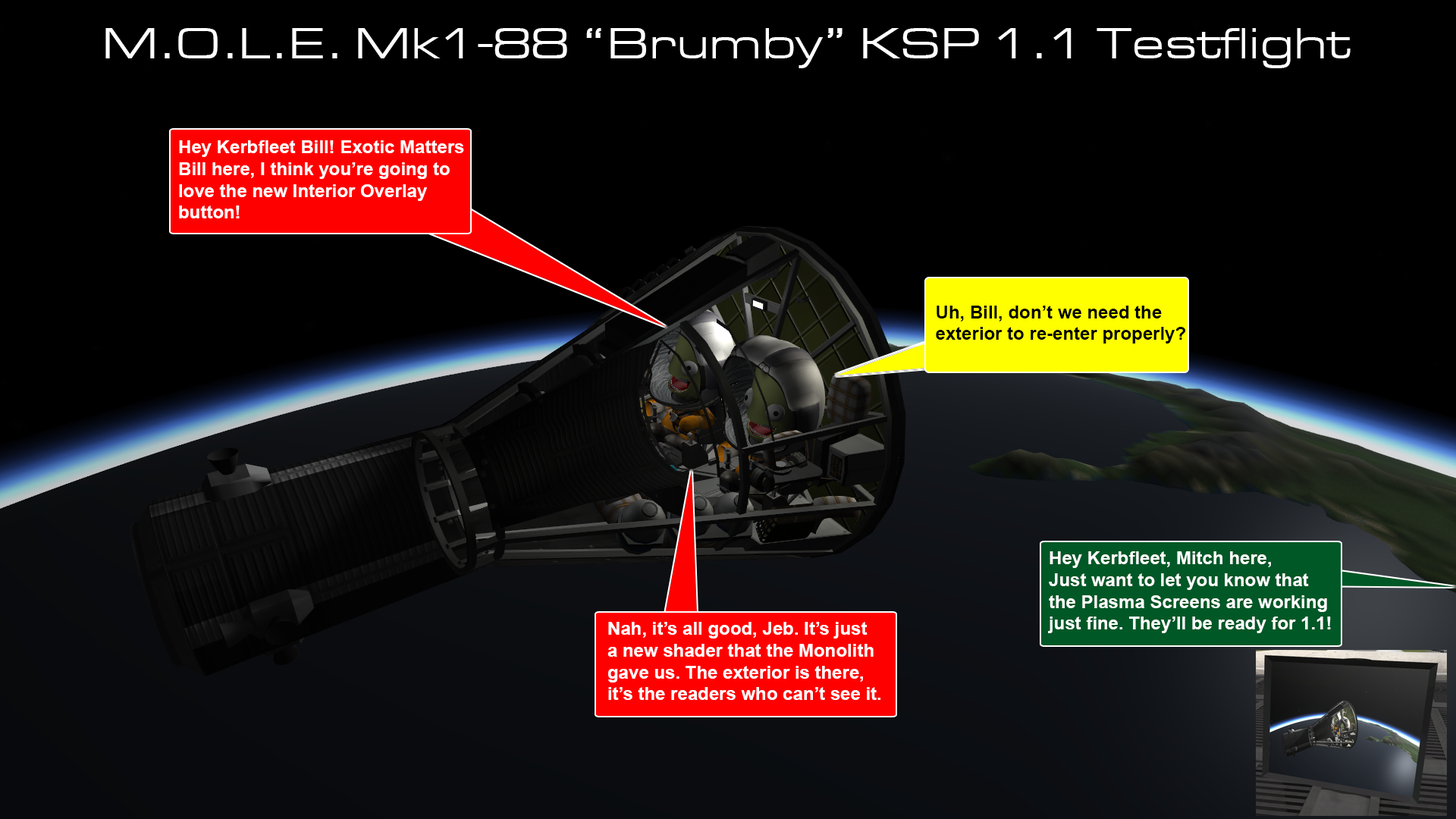
<style>
.page{position:relative;width:1456px;height:819px;background:#000000}
.page>*{position:absolute;margin:0}
.t1{font:45.5px "EurostileExtended-Roman";color:#ffffff}
.t2{font:18.2px "Arial-BoldMT";color:#ffffff}
.t3{font:18.2px "Arial-BoldMT";color:#000000}
</style>
<div class="page">
<p class="t1" style="left:105px;top:28px;width:1246px;height:40px">M.O.L.E. Mk1-88 “Brumby” KSP 1.1 Testflight</p>
<p class="t2" style="left:179px;top:140px;width:285px;height:78px">Hey Kerbfleet Bill! Exotic Matters<br>Bill here, I think you’re going to<br>love the new Interior Overlay<br>button!</p>
<p class="t3" style="left:936px;top:306px;width:250px;height:38px">Uh, Bill, don’t we need the<br>exterior to re-enter properly?</p>
<p class="t2" style="left:1048px;top:551px;width:283px;height:82px">Hey Kerbfleet, Mitch here, <br>Just want to let you know that <br>the Plasma Screens are working <br>just fine. They’ll be ready for 1.1!</p>
<p class="t2" style="left:607px;top:622px;width:273px;height:78px">Nah, it’s all good, Jeb. It’s just<br>a new shader that the Monolith<br>gave us. The exterior is there,<br>it’s the readers who can’t see it.</p>
</div>
